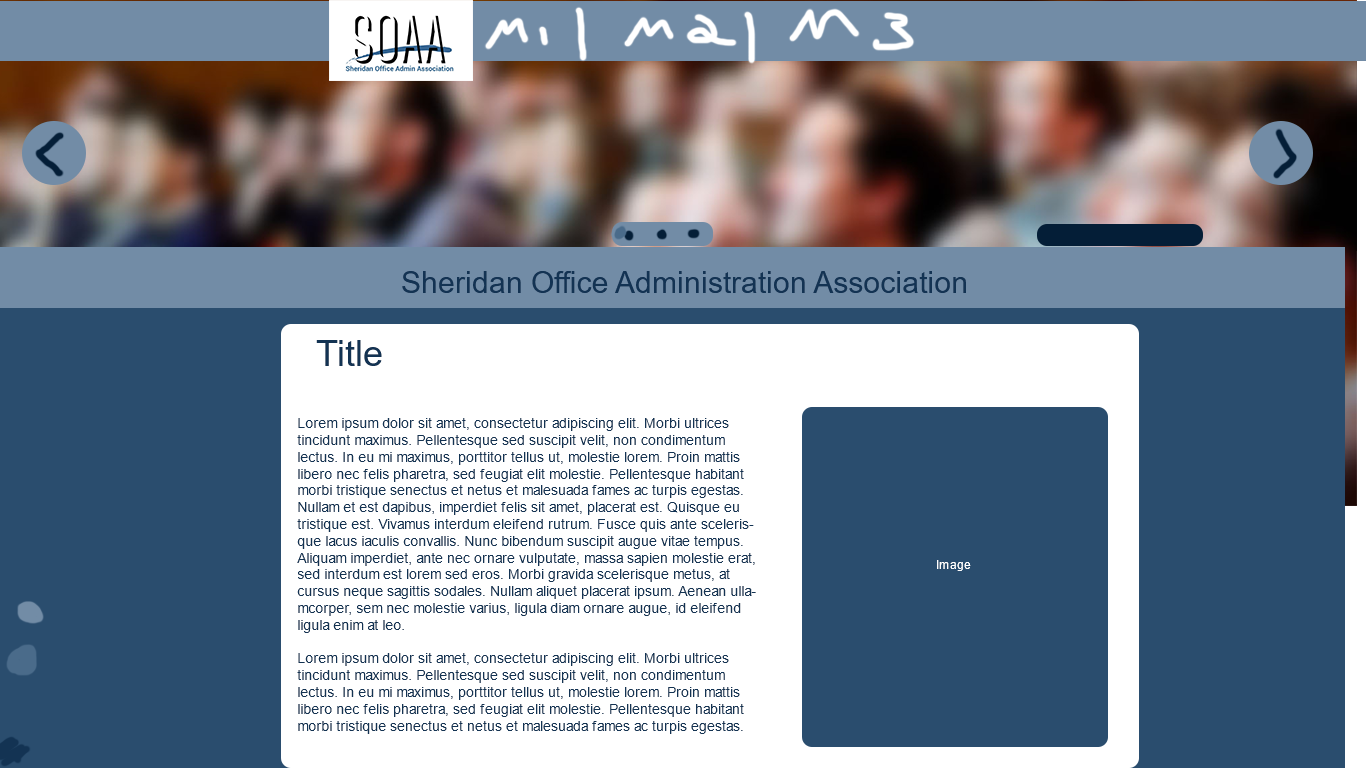
<style>
.page{position:relative;width:1366px;height:768px;background:#2a4d6e}
.page>*{position:absolute;margin:0}
.t1{font:30px "ArialMT";color:#133353}
.t2{font:36px "ArialMT";color:#133353}
.t3{font:14px "ArialMT";color:#133353}
.t4{font:12px "ArialMT";color:#133353}
.t5{font:12px "ArialMT";color:#ffffff}
</style>
<div class="page">
<p class="t1" style="left:402px;top:271px;width:564px;height:22px">Sheridan Office Administration Association</p>
<p class="t2" style="left:316px;top:340px;width:66px;height:26px">Title</p>
<p class="t3" style="left:297px;top:418px;width:459px;height:316px">Lorem ipsum dolor sit amet, consectetur adipiscing elit. Morbi ultrices tincidunt maximus. Pellentesque sed suscipit velit, non condimentum lectus. In eu mi maximus, porttitor tellus ut, molestie lorem. Proin mattis libero nec felis pharetra, sed feugiat elit molestie. Pellentesque habitant morbi tristique senectus et netus et malesuada fames ac turpis egestas. Nullam et est dapibus, imperdiet felis sit amet, placerat est. Quisque eu tristique est. Vivamus interdum eleifend rutrum. Fusce quis ante scelerisque lacus iaculis convallis. Nunc bibendum suscipit augue vitae tempus. Aliquam imperdiet, ante nec ornare vulputate, massa sapien molestie erat, sed interdum est lorem sed eros. Morbi gravida scelerisque metus, at cursus neque sagittis sodales. Nullam aliquet placerat ipsum. Aenean ullamcorper, sem nec molestie varius, ligula diam ornare augue, id eleifend ligula enim at leo.<br><br>Lorem ipsum dolor sit amet, consectetur adipiscing elit. Morbi ultrices tincidunt maximus. Pellentesque sed suscipit velit, non condimentum lectus. In eu mi maximus, porttitor tellus ut, molestie lorem. Proin mattis libero nec felis pharetra, sed feugiat elit molestie. Pellentesque habitant morbi tristique senectus et netus et malesuada fames ac turpis egestas. Nullam et est dapibus, imperdiet felis sit amet, placerat est. Quisque eu tristique est. Vivamus interdum eleifend rutrum. Fusce quis ante scelerisque lacus iaculis convallis. Nunc bibendum suscipit augue vitae tempus. Aliquam imperdiet, ante nec ornare vulputate, massa sapien molestie erat, sed interdum est lorem sed eros. Morbi gravida scelerisque metus, at cursus neque sagittis sodales. Nullam aliquet placerat ipsum. Aenean ullamcorper, sem nec molestie varius, ligula<span class="t4"> diam ornare augue, id eleifend ligula enim at leo.</span></p>
<p class="t5" style="left:937px;top:560px;width:34px;height:11px">Image</p>
</div>
